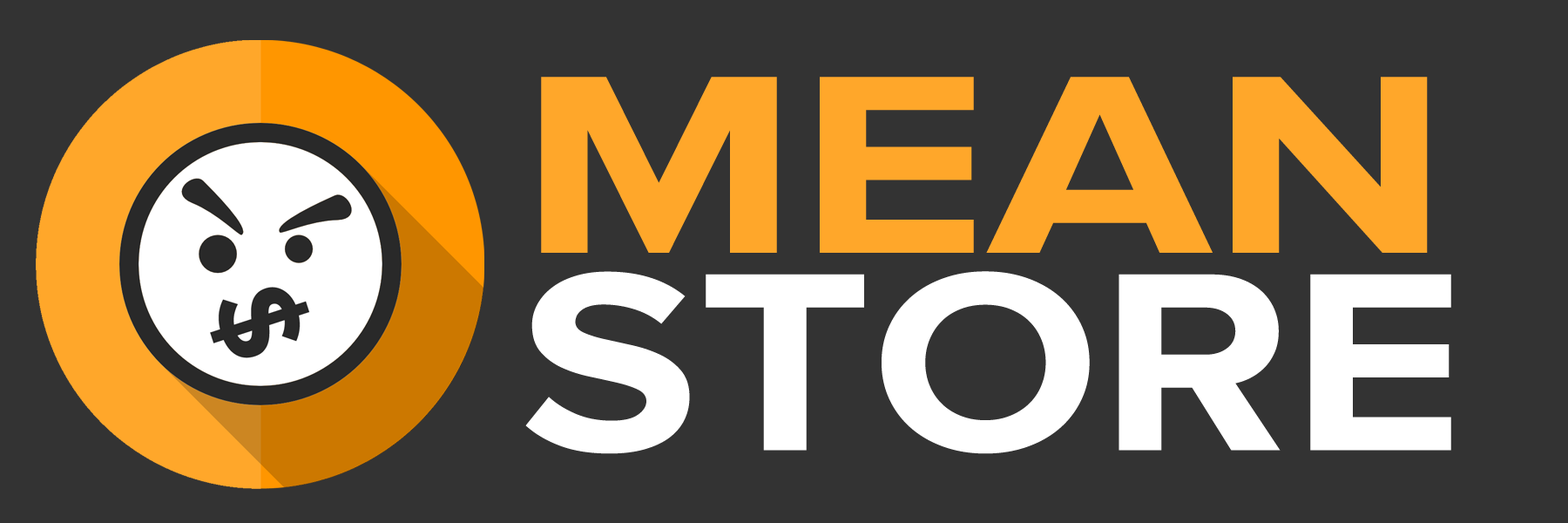
<style>
.page{position:relative;width:1568px;height:523px;background:#333333}
.page>*{position:absolute;margin:0}
.t1{font:263.3px "ProximaNova-Bold";color:#ffa72a;scale:1.24 1}
.t2{font:263.3px "ProximaNova-Bold";color:#ffffff;scale:1.13 1}
</style>
<div class="page">
<p class="t1" style="left:541px;top:77px;width:887px;height:176px">MEAN</p>
<p class="t2" style="left:525px;top:271px;width:926px;height:183px">STORE</p>
</div>
